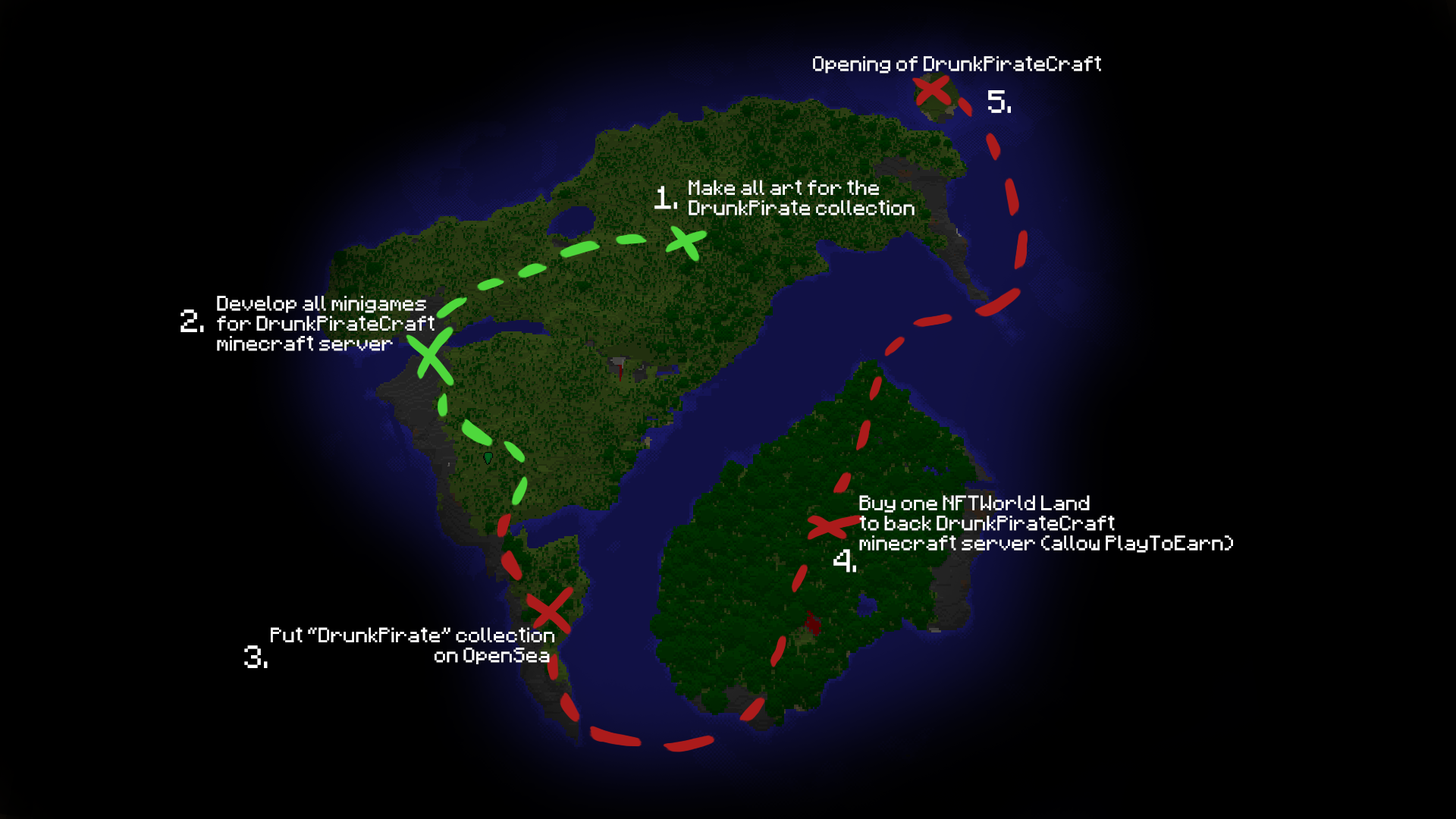
<style>
.page{position:relative;width:1456px;height:819px;background:#000000}
.page>*{position:absolute;margin:0}
.t1{font:16.7px "Minecraftia-Regular";color:#ffffff}
.t2{font:25.8px "Minecraftia-Regular";color:#ffffff}
</style>
<div class="page">
<p class="t1" style="left:813px;top:56px;width:288px;height:18px">Opening of DrunkPirateCraft</p>
<p class="t2" style="left:988px;top:90px;width:23px;height:23px">5.</p>
<p class="t2" style="left:654px;top:186px;width:23px;height:23px">1.</p>
<p class="t1" style="left:689px;top:180px;width:226px;height:35px">Make all art for the<br>DrunkPirate collection</p>
<p class="t1" style="left:217px;top:296px;width:218px;height:55px">Develop all minigames <br>for DrunkPirateCraft<br>minecraft server</p>
<p class="t2" style="left:180px;top:309px;width:24px;height:23px">2.</p>
<p class="t1" style="left:859px;top:495px;width:374px;height:58px">Buy one NFTWorld Land<br>to back DrunkPirateCraft<br>minecraft server (allow PlayToEarn)</p>
<p class="t2" style="left:833px;top:549px;width:23px;height:24px">4.</p>
<p class="t1" style="left:271px;top:627px;width:283px;height:37px">Put “DrunkPirate” collection <br>      on OpenSea</p>
<p class="t2" style="left:244px;top:645px;width:24px;height:23px">3.</p>
</div>
